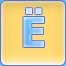
<style>
.page{position:relative;width:66px;height:66px}
.page>*{position:absolute;margin:0}
.t1{font:41px "Tahoma-Bold"}
</style>
<div class="page">
<p class="t1" style="left:23px;top:8px;width:21px;height:39px">Ё</p>
<p class="t1" style="left:23px;top:8px;width:21px;height:39px">Ё</p>
</div>
